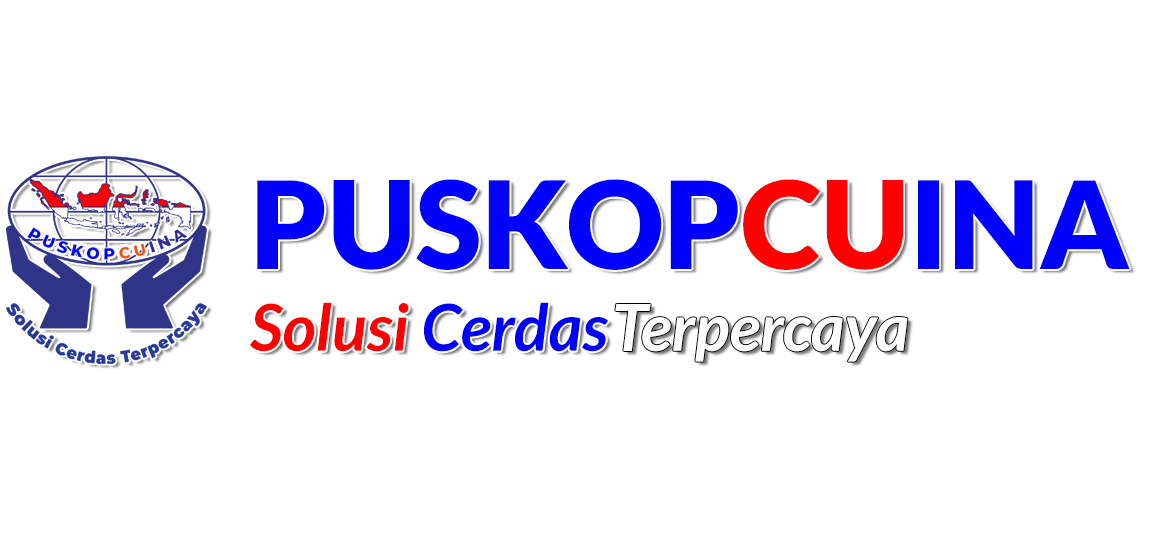
<style>
.page{position:relative;width:1156px;height:559px;background:#ffffff}
.page>*{position:absolute;margin:0}
.t1{font:121.2px "Lato-Black";color:#0000ff}
.t2{font:121.2px "Lato-Black";color:#ff0000}
.t3{font:64.8px "Lato-BoldItalic";color:#ff0000}
.t4{font:64.8px "Lato-BoldItalic";color:#0000ff}
</style>
<div class="page">
<p class="t1" style="left:257px;top:179px;width:873px;height:91px">PUSKOP<span class="t2">CU</span>INA</p>
<p class="t3" style="left:250px;top:302px;width:358px;height:50px">Solusi <span class="t4">Cerdas</span></p>
</div>
